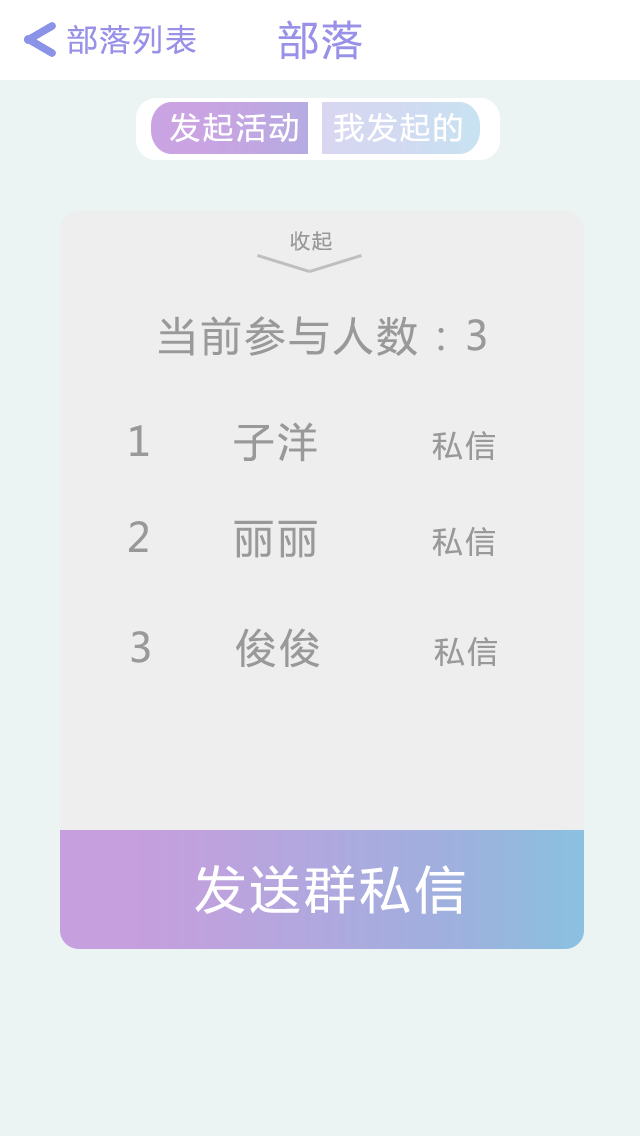
<style>
.page{position:relative;width:640px;height:1136px;background:#eeeeee}
.page>*{position:absolute;margin:0}
.t1{font:30px "MicrosoftYaHei";letter-spacing:0.1em;color:#9991e8}
.t2{font:40px "MicrosoftYaHei";letter-spacing:0.1em;color:#9991e8}
.t3{font:30px "MicrosoftYaHei";letter-spacing:0.1em;color:#ffffff}
.t4{font:20px "MicrosoftYaHei";letter-spacing:0.1em;color:#999999}
.t5{font:40px "MicrosoftYaHei";letter-spacing:0.1em;color:#999999}
.t6{font:30px "MicrosoftYaHei";letter-spacing:0.1em;color:#999999}
.t7{font:50px "MicrosoftYaHei";letter-spacing:0.1em;color:#ffffff}
</style>
<div class="page">
<p class="t1" style="left:67px;top:24px;width:129px;height:31px">部落列表</p>
<p class="t2" style="left:278px;top:20px;width:84px;height:40px">部落</p>
<p class="t3" style="left:170px;top:112px;width:128px;height:31px">发起活动</p>
<p class="t3" style="left:334px;top:112px;width:128px;height:31px">我发起的</p>
<p class="t4" style="left:290px;top:231px;width:42px;height:20px">收起</p>
<p class="t5" style="left:159px;top:316px;width:327px;height:40px">当前参与人数：3</p>
<p class="t5" style="left:130px;top:422px;width:365px;height:40px">1     子洋       <span class="t6">私信</span></p>
<p class="t5" style="left:129px;top:520px;width:366px;height:38px">2     丽丽       <span class="t6">私信</span></p>
<p class="t5" style="left:131px;top:628px;width:366px;height:40px">3     俊俊       <span class="t6">私信</span></p>
<p class="t7" style="left:195px;top:865px;width:270px;height:49px">发送群私信</p>
</div>
